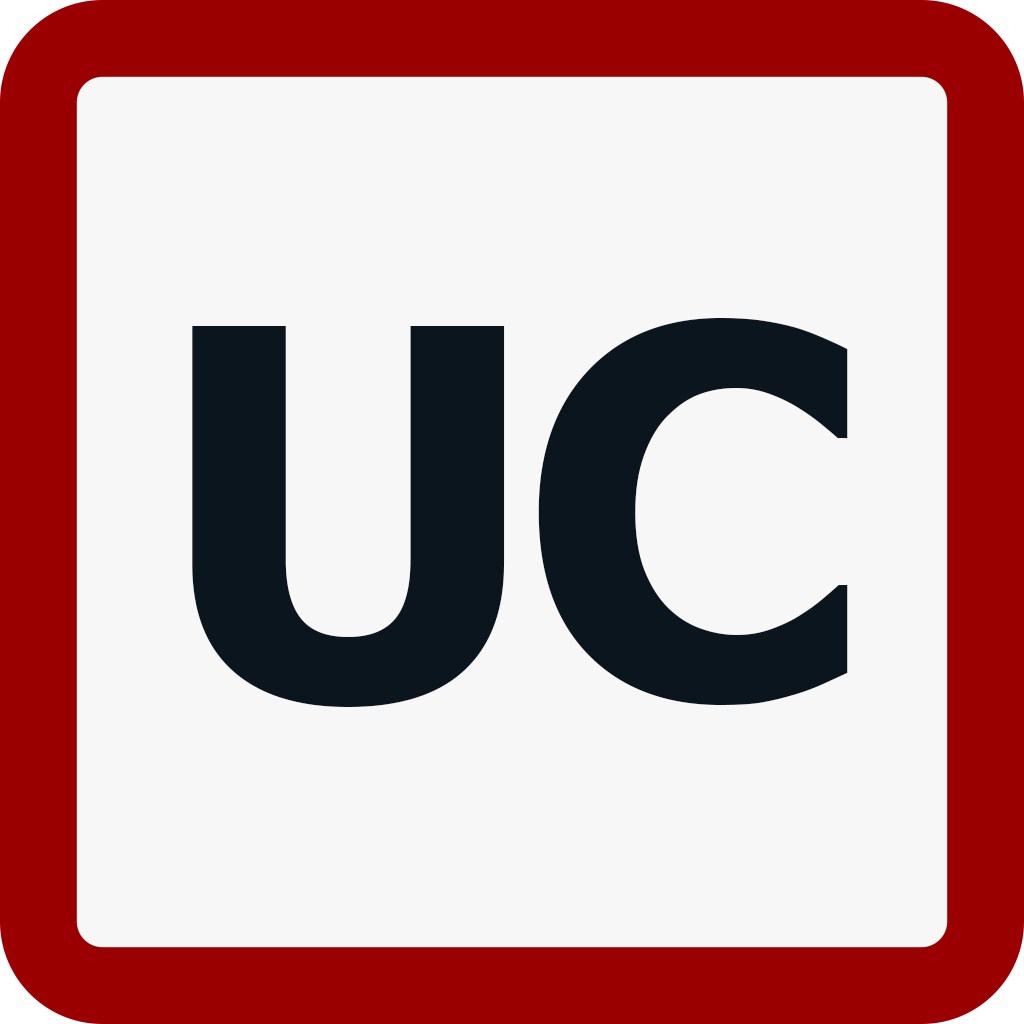
<style>
.page{position:relative;width:1024px;height:1024px;background:#f7f7f7}
.page>*{position:absolute;margin:0}
.t1{font:512px "Tahoma-Bold";letter-spacing:-0.03em;color:#0a151d}
</style>
<div class="page">
<p class="t1" style="left:192px;top:318px;width:656px;height:389px">UC</p>
</div>
